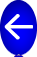
<style>
.page{position:relative;width:37px;height:57px;background:#ffffff}
.page>*{position:absolute;margin:0}
.t1{font:36px "Calibri";color:#ffffff;font-weight:bold}
</style>
<div class="page">
<p class="t1" style="left:4px;top:14px;width:29px;height:26px">←</p>
</div>
